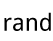
<style>
.page{position:relative;width:53px;height:41px;background:#ffffff}
.page>*{position:absolute;margin:0}
.t1{font:23.7px "DroidSans";color:#000000}
</style>
<div class="page">
<p class="t1" style="left:4px;top:12px;width:47px;height:19px">rand</p>
</div>
